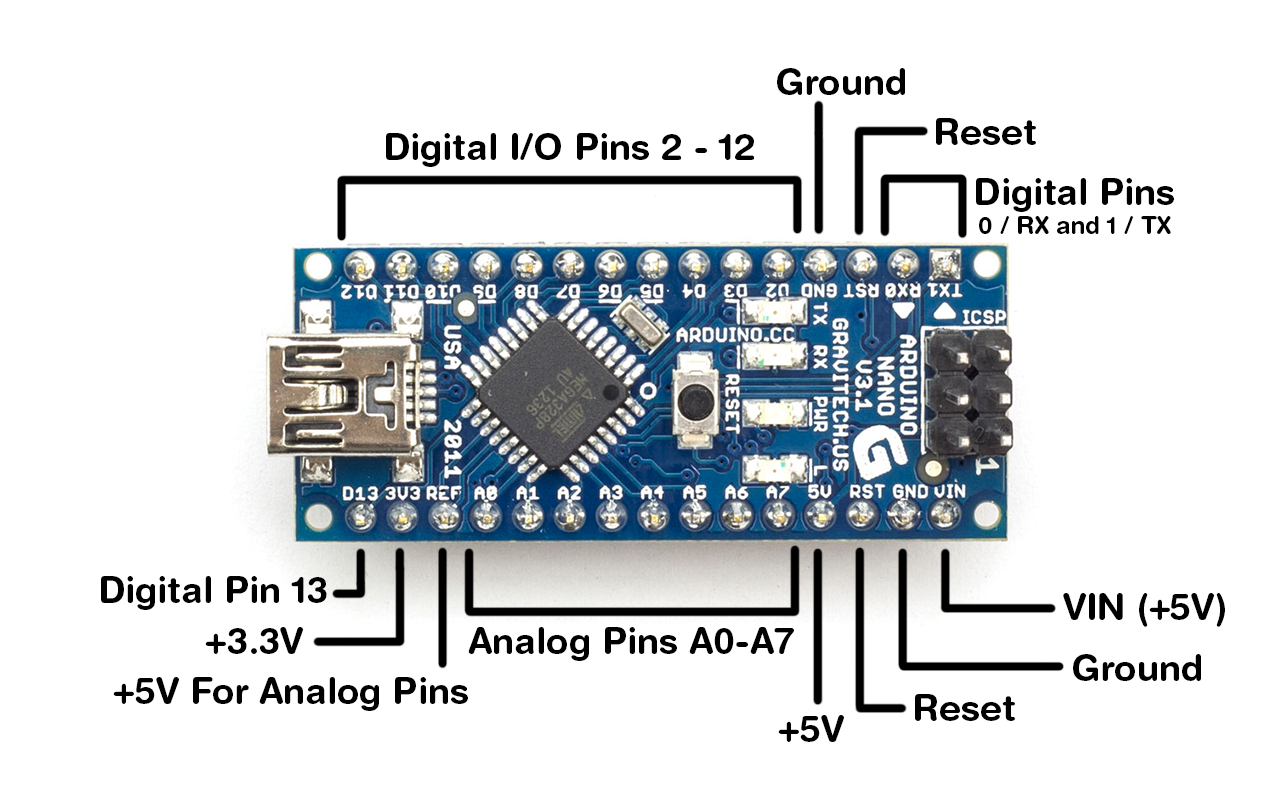
<style>
.page{position:relative;width:1280px;height:800px;background:#ffffff}
.page>*{position:absolute;margin:0}
.t1{font:36px "HelveticaRounded-Bold";color:#000000}
.t2{font:24px "HelveticaRounded-Bold";color:#000000}
</style>
<div class="page">
<p class="t1" style="left:777px;top:68px;width:128px;height:27px">Ground</p>
<p class="t1" style="left:936px;top:118px;width:100px;height:27px">Reset</p>
<p class="t1" style="left:386px;top:133px;width:369px;height:34px">Digital I/O Pins 2 - 12</p>
<p class="t2" style="left:976px;top:178px;width:198px;height:56px;text-align:center"><span class="t1">Digital Pins<br></span>0 / RX and 1 / TX</p>
<p class="t1" style="left:101px;top:576px;width:226px;height:34px">Digital Pin 13</p>
<p class="t1" style="left:1063px;top:593px;width:162px;height:34px">VIN (+5V)</p>
<p class="t1" style="left:205px;top:627px;width:98px;height:27px">+3.3V</p>
<p class="t1" style="left:468px;top:627px;width:326px;height:34px">Analog Pins A0-A7</p>
<p class="t1" style="left:1073px;top:654px;width:128px;height:27px">Ground</p>
<p class="t1" style="left:113px;top:677px;width:355px;height:34px">+5V For Analog Pins</p>
<p class="t1" style="left:915px;top:694px;width:100px;height:27px">Reset</p>
<p class="t1" style="left:778px;top:715px;width:66px;height:27px">+5V</p>
</div>
